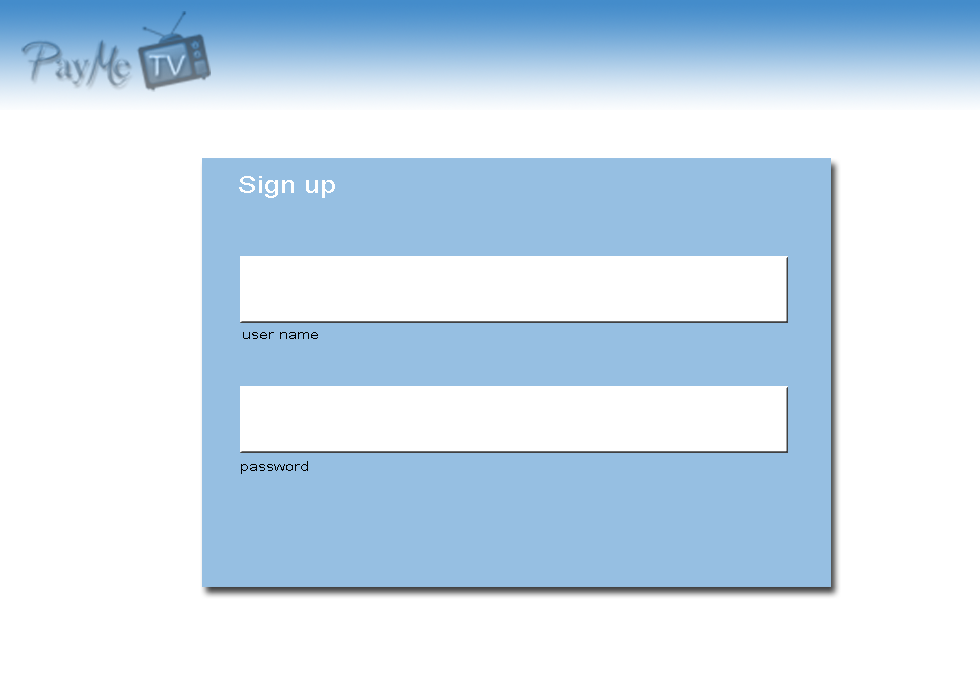
<style>
.page{position:relative;width:980px;height:700px;background:#ffffff}
.page>*{position:absolute;margin:0}
.t1{font:24.5px "ArialMT";color:#ffffff;scale:1.19 1}
.t2{font:14.3px "ArialMT";color:#000000;scale:1.19 1}
</style>
<div class="page">
<p class="t1" style="left:239px;top:176px;width:96px;height:22px">Sign up</p>
<p class="t2" style="left:243px;top:332px;width:75px;height:7px">user name</p>
<p class="t2" style="left:241px;top:461px;width:67px;height:13px">password</p>
</div>
